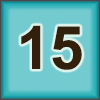
<style>
.page{position:relative;width:100px;height:100px;background:#73cbd0}
.page>*{position:absolute;margin:0}
.t1{font:60px "Arial-BoldMT";color:#32200d}
</style>
<div class="page">
<p class="t1" style="left:21px;top:25px;width:61px;height:45px">15</p>
</div>
